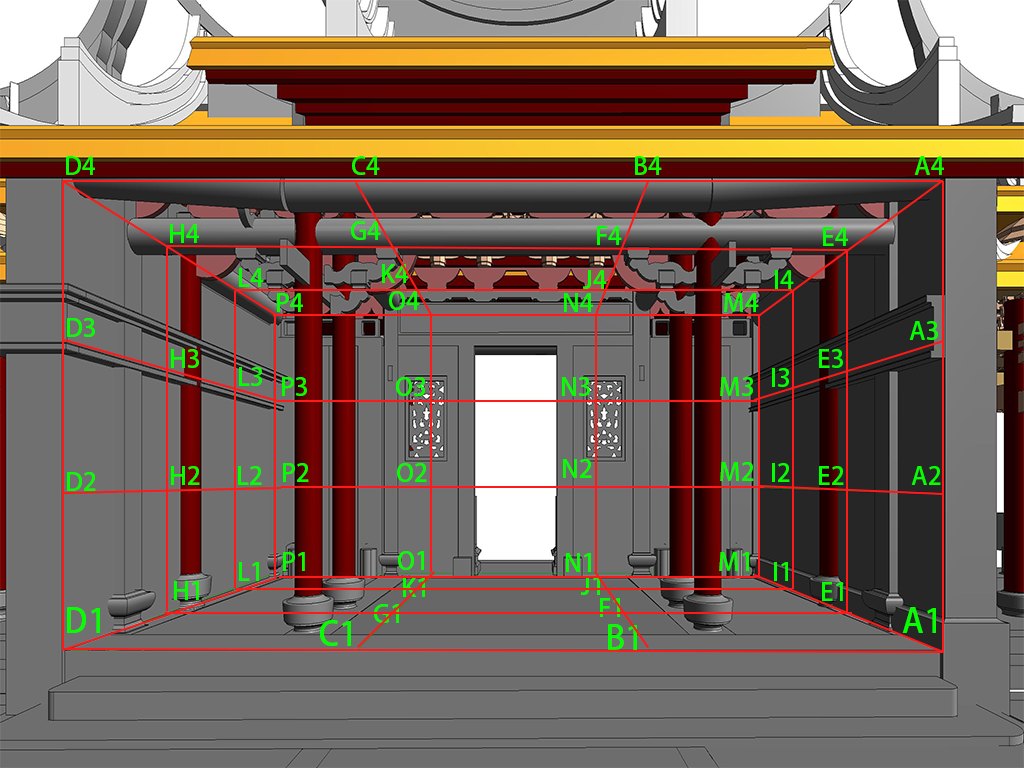
<style>
.page{position:relative;width:1024px;height:768px}
.page>*{position:absolute;margin:0}
.t1{font:25px "AdobeFanHeitiStd-Bold";color:#06ff00}
.t2{font:33.3px "AdobeFanHeitiStd-Bold";color:#06ff00}
</style>
<div class="page">
<p class="t1" style="left:66px;top:156px;width:29px;height:19px">D4</p>
<p class="t1" style="left:352px;top:156px;width:28px;height:19px">C4</p>
<p class="t1" style="left:635px;top:156px;width:27px;height:19px">B4</p>
<p class="t1" style="left:914px;top:156px;width:30px;height:19px">A4</p>
<p class="t1" style="left:351px;top:221px;width:30px;height:19px">G4</p>
<p class="t1" style="left:170px;top:224px;width:29px;height:19px">H4</p>
<p class="t1" style="left:597px;top:226px;width:25px;height:19px">F4</p>
<p class="t1" style="left:823px;top:227px;width:25px;height:19px">E4</p>
<p class="t1" style="left:239px;top:268px;width:25px;height:19px">L4</p>
<p class="t1" style="left:382px;top:264px;width:27px;height:19px">K4</p>
<p class="t1" style="left:583px;top:270px;width:24px;height:19px">J4</p>
<p class="t1" style="left:775px;top:270px;width:19px;height:19px">I4</p>
<p class="t1" style="left:277px;top:293px;width:26px;height:19px">P4</p>
<p class="t1" style="left:389px;top:291px;width:31px;height:19px">O4</p>
<p class="t1" style="left:564px;top:293px;width:29px;height:19px">N4</p>
<p class="t1" style="left:724px;top:293px;width:35px;height:19px">M4</p>
<p class="t1" style="left:67px;top:318px;width:28px;height:19px">D3</p>
<p class="t1" style="left:909px;top:321px;width:29px;height:19px">A3</p>
<p class="t1" style="left:171px;top:349px;width:28px;height:19px">H3</p>
<p class="t1" style="left:819px;top:349px;width:24px;height:19px">E3</p>
<p class="t1" style="left:239px;top:367px;width:23px;height:19px">L3</p>
<p class="t1" style="left:282px;top:377px;width:25px;height:19px">P3</p>
<p class="t1" style="left:396px;top:377px;width:29px;height:19px">O3</p>
<p class="t1" style="left:562px;top:377px;width:28px;height:19px">N3</p>
<p class="t1" style="left:720px;top:377px;width:33px;height:19px">M3</p>
<p class="t1" style="left:772px;top:368px;width:17px;height:19px">I3</p>
<p class="t1" style="left:563px;top:459px;width:29px;height:19px">N2</p>
<p class="t1" style="left:720px;top:462px;width:34px;height:19px">M2</p>
<p class="t1" style="left:67px;top:472px;width:29px;height:19px">D2</p>
<p class="t1" style="left:171px;top:466px;width:29px;height:19px">H2</p>
<p class="t1" style="left:238px;top:466px;width:24px;height:19px">L2</p>
<p class="t1" style="left:283px;top:463px;width:26px;height:19px">P2</p>
<p class="t1" style="left:397px;top:463px;width:30px;height:19px">O2</p>
<p class="t1" style="left:772px;top:463px;width:18px;height:19px">I2</p>
<p class="t1" style="left:819px;top:466px;width:25px;height:19px">E2</p>
<p class="t1" style="left:911px;top:466px;width:30px;height:19px">A2</p>
<p class="t1" style="left:283px;top:552px;width:22px;height:19px">P1</p>
<p class="t1" style="left:398px;top:551px;width:26px;height:19px">O1</p>
<p class="t1" style="left:566px;top:553px;width:25px;height:19px">N1</p>
<p class="t1" style="left:719px;top:552px;width:30px;height:19px">M1</p>
<p class="t1" style="left:239px;top:562px;width:20px;height:19px">L1</p>
<p class="t1" style="left:774px;top:562px;width:14px;height:19px">I1</p>
<p class="t1" style="left:174px;top:581px;width:25px;height:19px">H1</p>
<p class="t1" style="left:403px;top:578px;width:22px;height:19px">K1</p>
<p class="t1" style="left:581px;top:576px;width:19px;height:19px">J1</p>
<p class="t1" style="left:822px;top:582px;width:21px;height:19px">E1</p>
<p class="t1" style="left:374px;top:604px;width:25px;height:19px">G1</p>
<p class="t1" style="left:600px;top:598px;width:20px;height:19px">F1</p>
<p class="t2" style="left:67px;top:607px;width:33px;height:26px">D1</p>
<p class="t2" style="left:902px;top:607px;width:34px;height:26px">A1</p>
<p class="t2" style="left:320px;top:620px;width:31px;height:26px">C1</p>
<p class="t2" style="left:608px;top:624px;width:29px;height:26px">B1</p>
</div>
